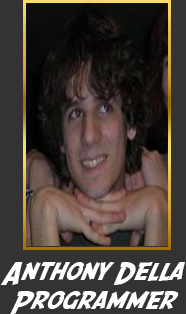
<style>
.page{position:relative;width:186px;height:314px;background:#333333}
.page>*{position:absolute;margin:0}
.t1{font:24.6px "SFFedora";letter-spacing:-0.005em;color:#fffffd;scale:1.05 1}
</style>
<div class="page">
<p class="t1" style="left:0px;top:262px;width:186px;height:52px;text-align:center">Anthony Della<br>Programmer</p>
</div>
